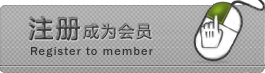
<style>
.page{position:relative;width:265px;height:73px}
.page>*{position:absolute;margin:0}
.t1{font:16px "MicrosoftYaHei";letter-spacing:0.1em;color:#3d3d3d}
.t2{font:24px "MicrosoftYaHei";letter-spacing:0.1em;color:#3d3d3d;font-weight:bold}
.t3{font:12px "FranklinGothic-Medium";letter-spacing:0.1em;color:#343030}
</style>
<div class="page">
<p class="t1" style="left:29px;top:16px;width:123px;height:25px"><span class="t2">注册</span>成为会员</p>
<p class="t3" style="left:31px;top:47px;width:122px;height:10px">Register to member</p>
</div>
